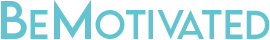
<style>
.page{position:relative;width:270px;height:40px;background:#ffffff}
.page>*{position:absolute;margin:0}
.t1{font:36px "LEMONMILK-Regular";letter-spacing:0.005em;color:#63c3d1}
.t2{font:48px "LEMONMILK-Regular";letter-spacing:0.005em;color:#63c3d1}
</style>
<div class="page">
<p class="t1" style="left:1px;top:0px;width:269px;height:39px"><span class="t2">B</span>e<span class="t2">M</span>otivated</p>
</div>
